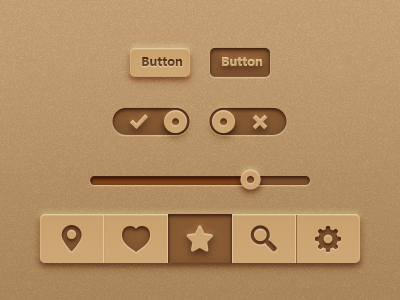
<style>
.page{position:relative;width:400px;height:300px}
.page>*{position:absolute;margin:0}
.t1{font:12px "MicrosoftYaHei-Bold";color:#633b1f}
.t2{font:12px "MicrosoftYaHei-Bold";color:#c79d6a}
</style>
<div class="page">
<p class="t1" style="left:142px;top:57px;width:41px;height:9px">Button</p>
<p class="t2" style="left:222px;top:57px;width:41px;height:9px">Button</p>
</div>
